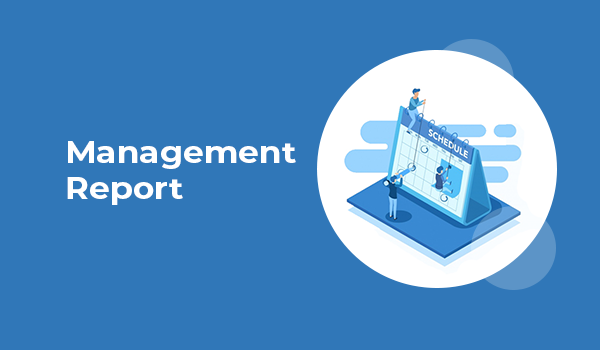
<style>
.page{position:relative;width:600px;height:350px;background:#3077b8}
.page>*{position:absolute;margin:0}
.t1{font:30px "Montserrat-Bold";color:#ffffff;scale:1.1 1}
</style>
<div class="page">
<p class="t1" style="left:67px;top:141px;width:229px;height:64px">Management<br>Report</p>
</div>
